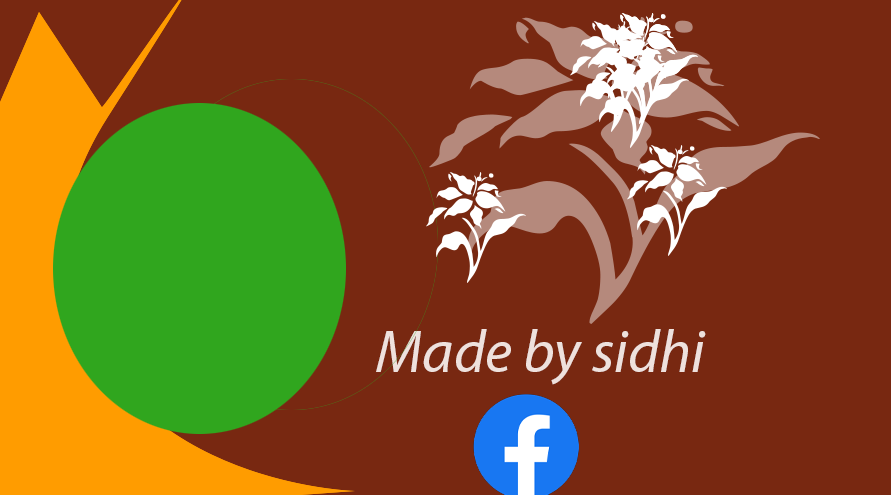
<style>
.page{position:relative;width:891px;height:495px;background:#782811}
.page>*{position:absolute;margin:0}
.t1{font:60px "MyriadPro-It";color:#eee1dd}
</style>
<div class="page">
<p class="t1" style="left:376px;top:329px;width:330px;height:56px">Made by sidhi</p>
</div>
